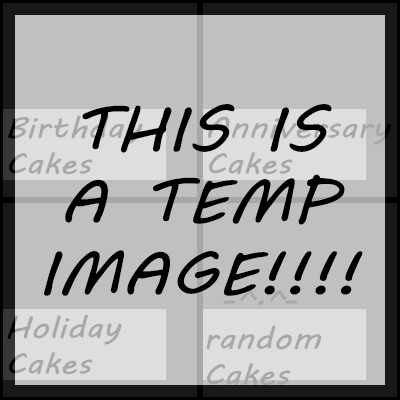
<style>
.page{position:relative;width:400px;height:400px;background:#c0c0c0}
.page>*{position:absolute;margin:0}
.t1{font:60px "MVBoli";letter-spacing:0.005em;color:#000000;scale:1.15 1}
.t2{font:30px "MVBoli";letter-spacing:0.005em;color:#a8a8a8;scale:1.15 1}
</style>
<div class="page">
<p class="t1" style="left:44px;top:104px;width:319px;height:192px;text-align:center">THIS IS<br>A TEMP<br>IMAGE!!!!</p>
<p class="t2" style="left:8px;top:114px;width:135px;height:61px">Birthday<br>Cakes</p>
<p class="t2" style="left:7px;top:314px;width:115px;height:61px">Holiday<br>Cakes</p>
</div>
